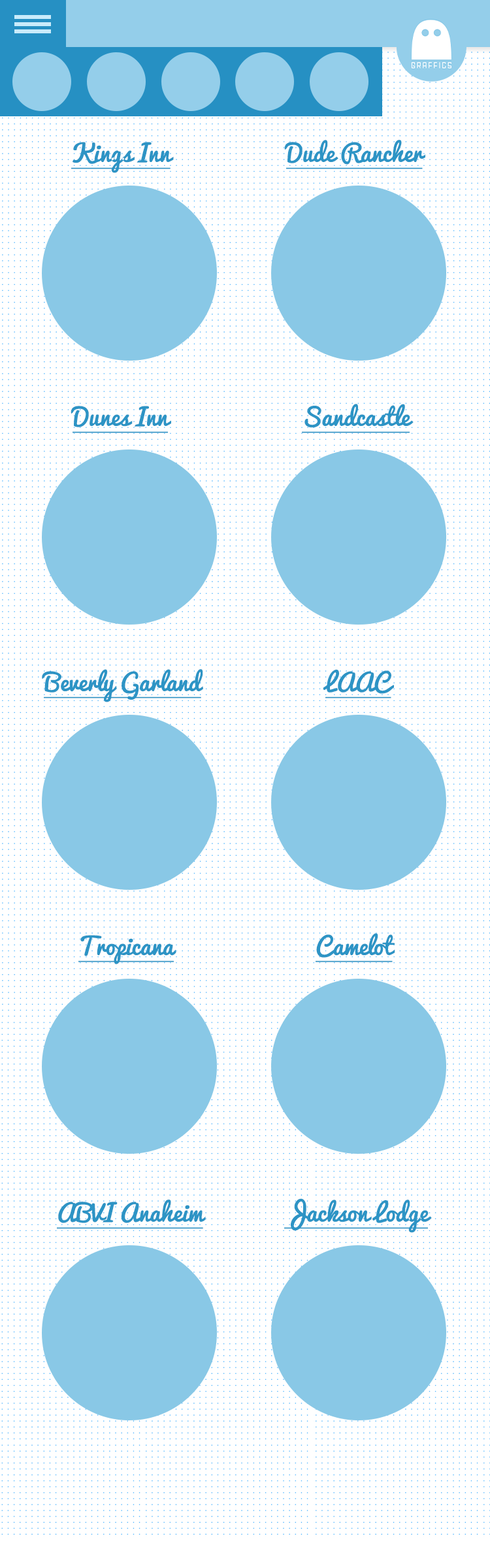
<style>
.page{position:relative;width:490px;height:1568px;background:#ffffff}
.page>*{position:absolute;margin:0}
.t1{font:23.5px "Pacifico";color:#2d94c5;text-decoration:underline}
</style>
<div class="page">
<p class="t1" style="left:71px;top:142px;width:103px;height:31px">Kings Inn</p>
<p class="t1" style="left:284px;top:140px;width:142px;height:29px">Dude Rancher</p>
<p class="t1" style="left:71px;top:406px;width:100px;height:27px">Dunes Inn</p>
<p class="t1" style="left:302px;top:404px;width:112px;height:29px">Sandcastle</p>
<p class="t1" style="left:42px;top:669px;width:161px;height:33px">Beverly Garland</p>
<p class="t1" style="left:323px;top:669px;width:71px;height:29px">LAAC</p>
<p class="t1" style="left:78px;top:935px;width:98px;height:29px">Tropicana</p>
<p class="t1" style="left:316px;top:933px;width:79px;height:29px">Camelot</p>
<p class="t1" style="left:57px;top:1200px;width:149px;height:29px">ABVI Anaheim</p>
<p class="t1" style="left:284px;top:1198px;width:148px;height:35px">Jackson Lodge</p>
</div>
